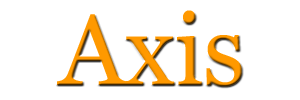
<style>
.page{position:relative;width:300px;height:100px;background:#ffffff}
.page>*{position:absolute;margin:0}
.t1{font:100.7px "Vani";color:#ff9900}
</style>
<div class="page">
<p class="t1" style="left:57px;top:10px;width:185px;height:77px">Axis</p>
</div>
